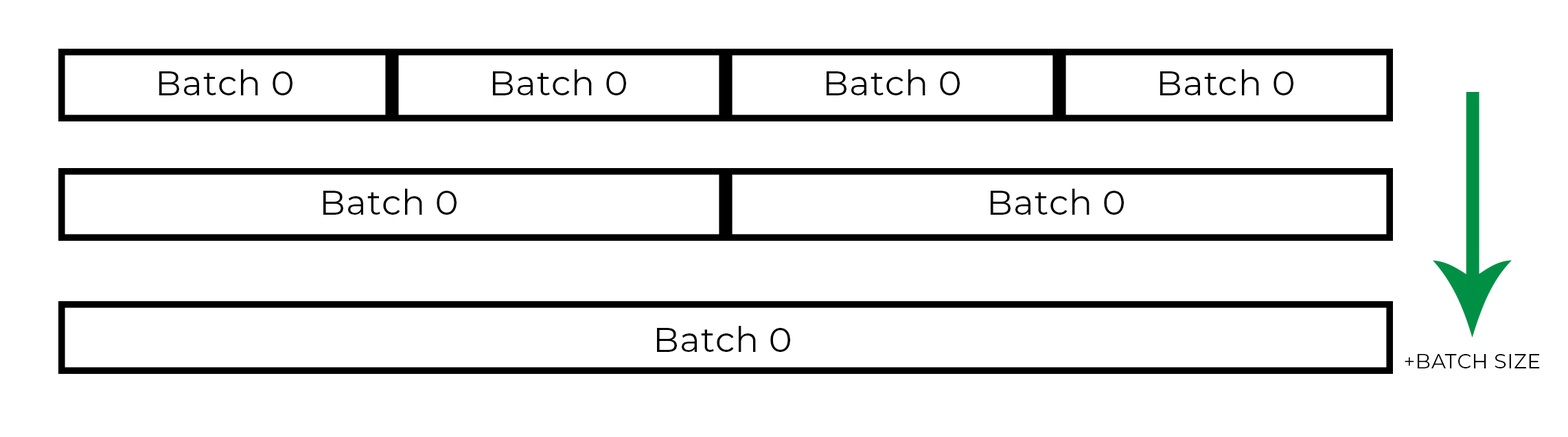
<style>
.page{position:relative;width:1568px;height:437px;background:#ffffff}
.page>*{position:absolute;margin:0}
.t1{font:34.7px "Montserrat-Regular";letter-spacing:0.02em;color:#000000}
.t2{font:20.2px "Montserrat-Regular";letter-spacing:0.02em;color:#000000}
</style>
<div class="page">
<p class="t1" style="left:159px;top:69px;width:133px;height:26px">Batch 0</p>
<p class="t1" style="left:493px;top:69px;width:133px;height:26px">Batch 0</p>
<p class="t1" style="left:827px;top:69px;width:133px;height:26px">Batch 0</p>
<p class="t1" style="left:1160px;top:69px;width:133px;height:26px">Batch 0</p>
<p class="t1" style="left:323px;top:189px;width:134px;height:26px">Batch 0</p>
<p class="t1" style="left:991px;top:189px;width:133px;height:26px">Batch 0</p>
<p class="t1" style="left:657px;top:326px;width:133px;height:26px">Batch 0</p>
<p class="t2" style="left:1405px;top:354px;width:135px;height:15px">+BATCH SIZE</p>
</div>
